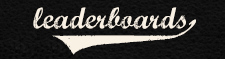
<style>
.page{position:relative;width:225px;height:61px;background:#111111}
.page>*{position:absolute;margin:0}
.t1{font:30px "MarcelleScript";color:#faf1e5}
.t2{font:30px "MarcelleSwashes";color:#faf1e5}
</style>
<div class="page">
<p class="t1" style="left:33px;top:7px;width:163px;height:48px">leaderboards<span class="t2">z</span></p>
</div>
